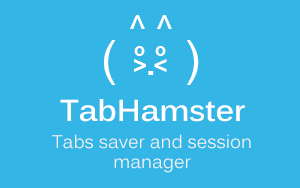
<style>
.page{position:relative;width:300px;height:188px;background:#33b5e5}
.page>*{position:absolute;margin:0}
.t1{font:36px "ArialMT";color:#ffffff}
.t2{font:48px "ArialMT";color:#ffffff}
.t3{font:18px "Arial-BoldMT";color:#ffffff}
.t4{font:24px "Arial-BoldMT";color:#ffffff}
.t5{font:30px "Kalinga-Bold";color:#ffffff}
.t6{font:18px/20px "Kalinga";color:#f4f4f4}
</style>
<div class="page">
<p class="t1" style="left:130px;top:15px;width:42px;height:14px">^ ^</p>
<p class="t2" style="left:104px;top:40px;width:95px;height:45px">(  .  )</p>
<p class="t3" style="left:134px;top:46px;width:32px;height:10px">o  o</p>
<p class="t4" style="left:134px;top:59px;width:33px;height:13px">&gt; &lt;</p>
<p class="t5" style="left:60px;top:99px;width:185px;height:23px">TabHamster</p>
<p class="t6" style="left:52px;top:134px;width:199px;height:39px;text-align:center">Tabs saver and session<br>manager</p>
</div>
